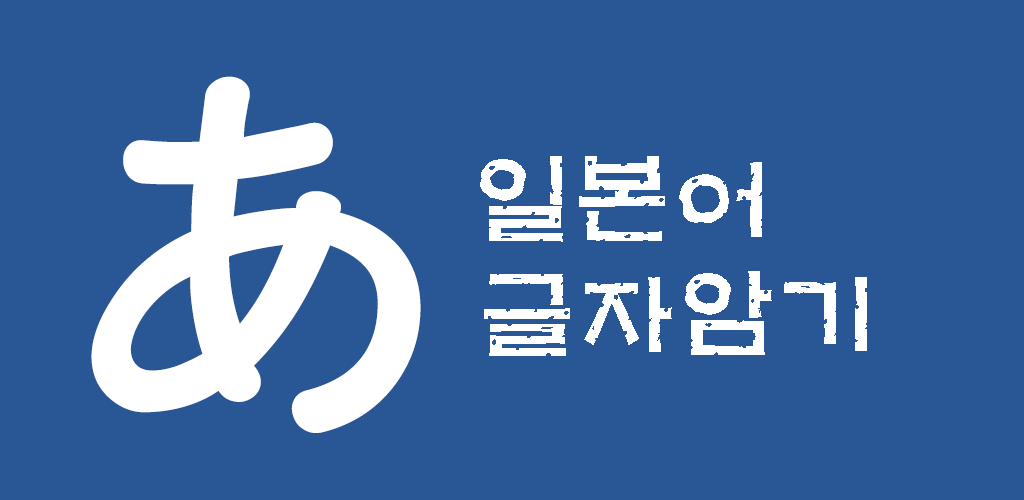
<style>
.page{position:relative;width:1024px;height:500px;background:#295795}
.page>*{position:absolute;margin:0}
.t1{font:462.2px "HYgsrB";color:#ffffff}
.t2{font:100px "H2mkpB";color:#ffffff}
</style>
<div class="page">
<p class="t1" style="left:91px;top:76px;width:330px;height:357px">あ</p>
<p class="t2" style="left:480px;top:156px;width:282px;height:86px">일본어</p>
<p class="t2" style="left:484px;top:271px;width:383px;height:85px">글자암기</p>
</div>
